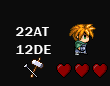
<style>
.page{position:relative;width:110px;height:86px;background:#0c0c0c}
.page>*{position:absolute;margin:0}
.t1{font:14px/18px "FranklinGothic-Medium";letter-spacing:0.05em;color:#ffffff}
</style>
<div class="page">
<p class="t1" style="left:16px;top:27px;width:35px;height:27px">22AT<br>12DE</p>
</div>
